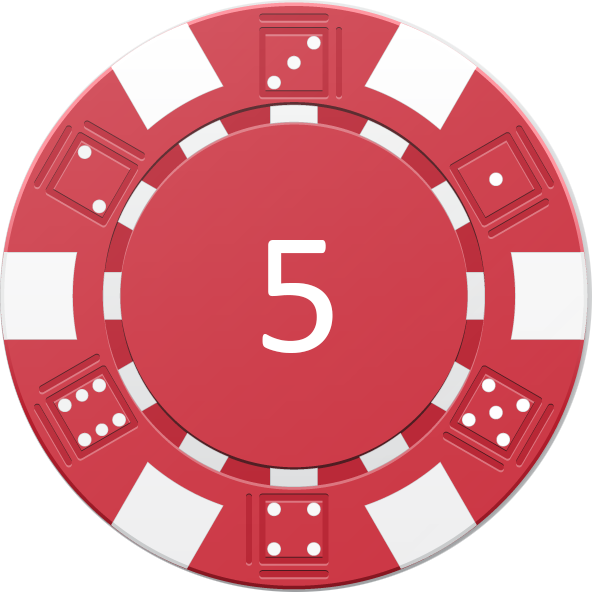
<style>
.page{position:relative;width:592px;height:592px;background:#ffffff}
.page>*{position:absolute;margin:0}
.t1{font:175px "Calibri";color:#ffffff}
</style>
<div class="page">
<p class="t1" style="left:262px;top:240px;width:71px;height:113px">5</p>
</div>
